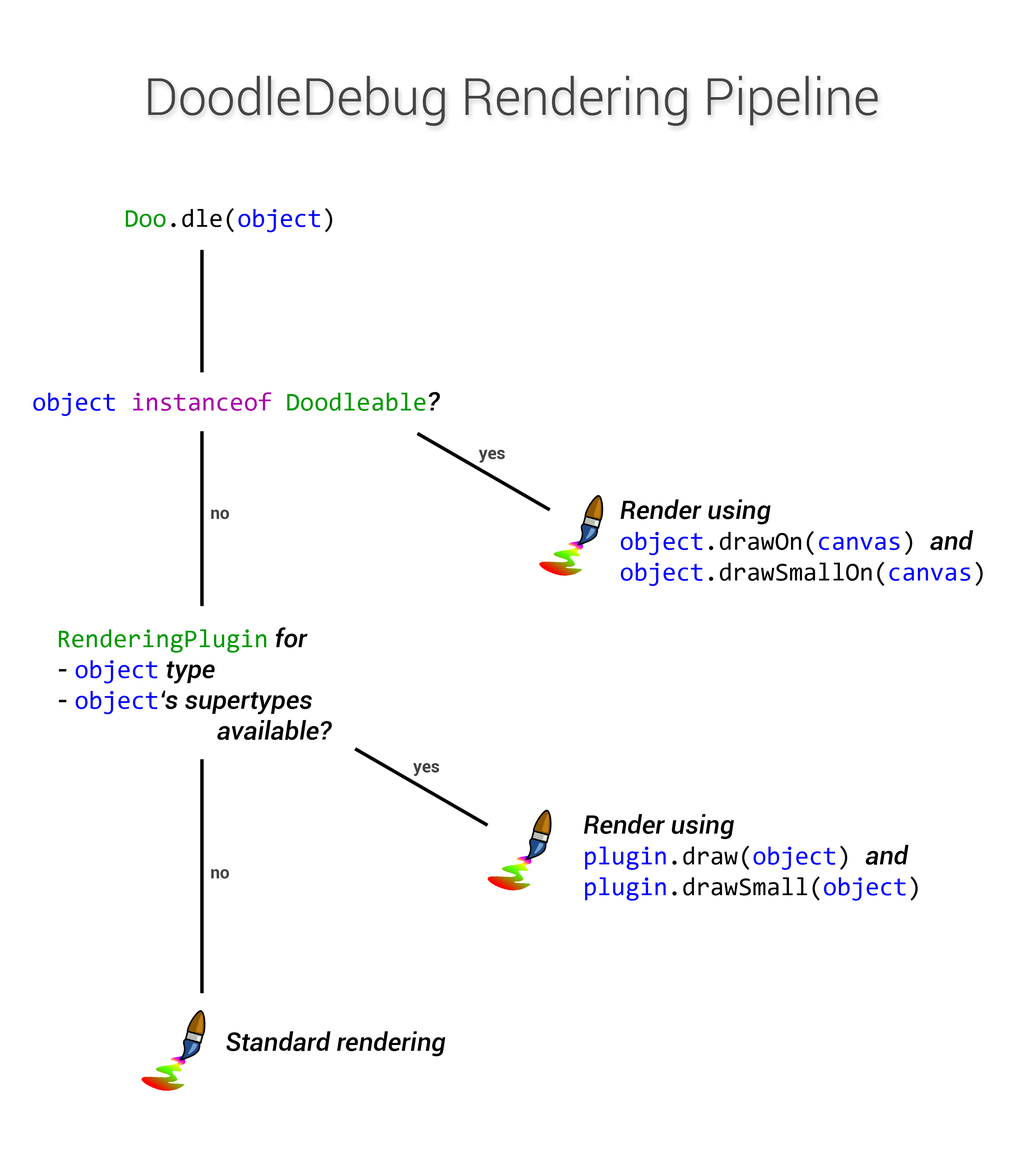
<style>
.page{position:relative;width:1026px;height:1163px;background:#ffffff}
.page>*{position:absolute;margin:0}
.t1{font:51.3px "Roboto-Light";color:#444444}
.t2{font:25.6px "Consolas";color:#0000ff}
.t3{font:25.6px "Consolas";color:#009900}
.t4{font:25.6px "Consolas";color:#000000}
.t5{font:25.6px "Consolas";color:#aa00aa}
.t6{font:25.6px "Roboto-MediumItalic";color:#000000}
.t7{font:17.1px "Roboto-Bold";color:#444444}
</style>
<div class="page">
<p class="t1" style="left:148px;top:76px;width:730px;height:50px">DoodleDebug Rendering Pipeline</p>
<p class="t2" style="left:126px;top:208px;width:206px;height:24px"><span class="t3">Doo</span><span class="t4">.dle(</span>object<span class="t4">)</span></p>
<p class="t5" style="left:33px;top:392px;width:407px;height:24px"><span class="t2">object </span>instanceof <span class="t3">Doodleable</span><span class="t6">?</span></p>
<p class="t7" style="left:479px;top:450px;width:26px;height:13px">yes</p>
<p class="t7" style="left:211px;top:509px;width:18px;height:10px">no</p>
<p class="t4" style="left:620px;top:499px;width:363px;height:87px"><span class="t6">Render using<br></span><span class="t2">object</span>.drawOn(<span class="t2">canvas</span>) <span class="t6">and<br></span><span class="t2">object</span>.drawSmallOn(<span class="t2">canvas</span>)</p>
<p class="t6" style="left:58px;top:627px;width:274px;height:113px"><span class="t3">RenderingPlugin</span> for<br>- <span class="t2">object</span> type<br>- <span class="t2">object</span>‘s supertypes<br>             available?</p>
<p class="t7" style="left:413px;top:763px;width:26px;height:13px">yes</p>
<p class="t6" style="left:584px;top:814px;width:334px;height:86px">Render using<br><span class="t2">plugin</span><span class="t4">.draw(</span><span class="t2">object</span><span class="t4">) </span>and<br><span class="t2">plugin</span><span class="t4">.drawSmall(</span><span class="t2">object</span><span class="t4">)</span></p>
<p class="t7" style="left:211px;top:869px;width:18px;height:9px">no</p>
<p class="t6" style="left:226px;top:1031px;width:219px;height:25px">Standard rendering</p>
</div>
